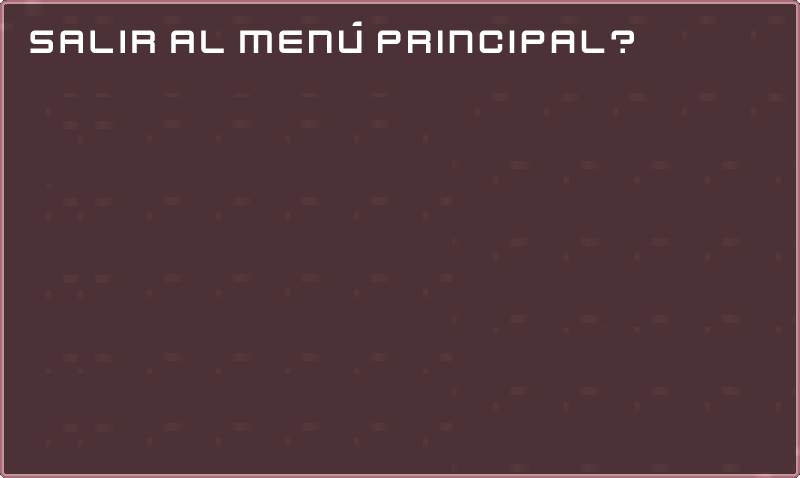
<style>
.page{position:relative;width:800px;height:478px;background:#4c3236}
.page>*{position:absolute;margin:0}
.t1{font:36px "KenVector-Future";color:#ffffff}
</style>
<div class="page">
<p class="t1" style="left:30px;top:21px;width:604px;height:32px">salir al menú principal?</p>
</div>
